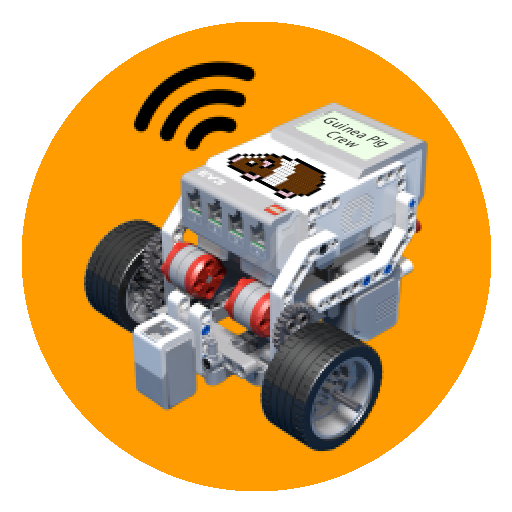
<style>
.page{position:relative;width:512px;height:512px;background:#ffffff}
.page>*{position:absolute;margin:0}
.t1{font:16.5px/16.5px "MyriadPro-Regular";letter-spacing:0.05em;color:#3c3c3c;scale:0.82 1}
</style>
<div class="page">
<p class="t1" style="left:323px;top:117px;width:66px;height:31px;text-align:center;rotate:23deg">Guinea Pig <br>Crew</p>
</div>
